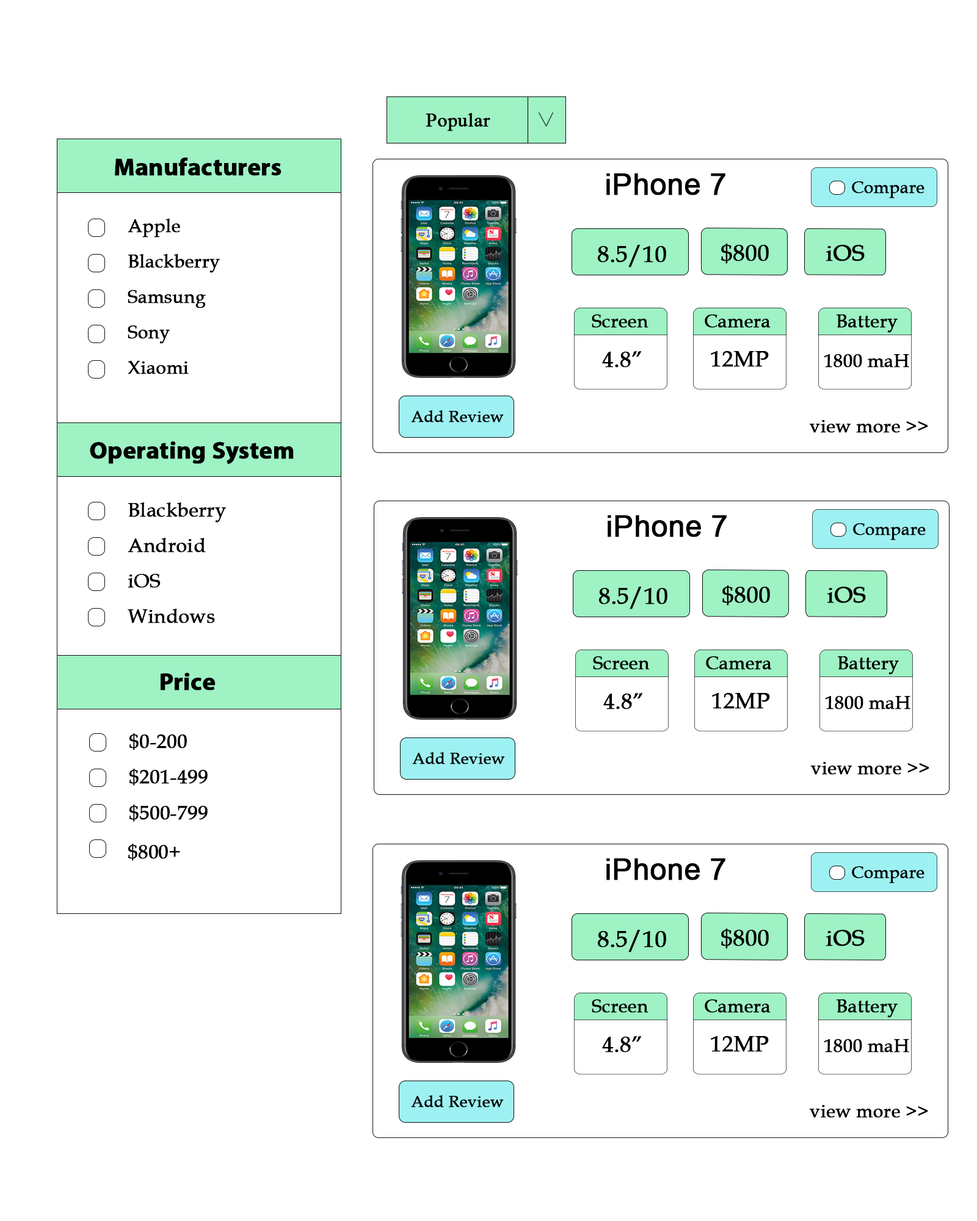
<style>
.page{position:relative;width:977px;height:1221px;background:#ffffff}
.page>*{position:absolute;margin:0}
.t1{font:19.5px "TimesNewRomanPSMT";color:#000000;font-weight:bold}
.t2{font:24.4px "MyriadPro-Bold";color:#010101;font-weight:bold}
.t3{font:29.3px "ArialMT";color:#000000;font-weight:bold}
.t4{font:17.1px "BookAntiqua";color:#000000;font-weight:bold}
.t5{font:18.3px "BookAntiqua";color:#000000;font-weight:bold}
.t6{font:23.2px "BookAntiqua";color:#000000;font-weight:bold}
.t7{font:22px "BookAntiqua";color:#000000;font-weight:bold}
.t8{font:15.9px "BookAntiqua";color:#000000;font-weight:bold}
.t9{font:19.5px "BookAntiqua";color:#000000;font-weight:bold}
</style>
<div class="page">
<p class="t1" style="left:425px;top:113px;width:65px;height:18px">Popular</p>
<p class="t2" style="left:115px;top:157px;width:166px;height:19px">Manufacturers</p>
<p class="t3" style="left:606px;top:173px;width:119px;height:22px">iPhone 7</p>
<p class="t4" style="left:852px;top:181px;width:72px;height:17px">Compare</p>
<p class="t5" style="left:128px;top:219px;width:52px;height:18px">Apple</p>
<p class="t6" style="left:598px;top:245px;width:68px;height:22px">8.5/10</p>
<p class="t6" style="left:721px;top:244px;width:48px;height:20px">$800</p>
<p class="t6" style="left:825px;top:245px;width:39px;height:16px">iOS</p>
<p class="t5" style="left:128px;top:254px;width:92px;height:19px">Blackberry</p>
<p class="t5" style="left:128px;top:290px;width:78px;height:18px">Samsung</p>
<p class="t5" style="left:592px;top:314px;width:56px;height:14px">Screen</p>
<p class="t5" style="left:704px;top:314px;width:66px;height:14px">Camera</p>
<p class="t5" style="left:836px;top:314px;width:61px;height:19px">Battery</p>
<p class="t5" style="left:128px;top:325px;width:42px;height:19px">Sony</p>
<p class="t7" style="left:602px;top:351px;width:39px;height:16px">4.8”</p>
<p class="t7" style="left:711px;top:351px;width:58px;height:16px">12MP</p>
<p class="t5" style="left:128px;top:361px;width:61px;height:13px">Xiaomi</p>
<p class="t5" style="left:824px;top:354px;width:85px;height:13px">1800 maH</p>
<p class="t8" style="left:411px;top:410px;width:93px;height:12px">Add Review</p>
<p class="t5" style="left:809px;top:420px;width:119px;height:13px">view more &gt;&gt;</p>
<p class="t2" style="left:90px;top:441px;width:204px;height:23px">Operating System</p>
<p class="t9" style="left:128px;top:502px;width:98px;height:21px">Blackberry</p>
<p class="t3" style="left:607px;top:515px;width:119px;height:22px">iPhone 7</p>
<p class="t4" style="left:853px;top:523px;width:72px;height:17px">Compare</p>
<p class="t9" style="left:128px;top:538px;width:78px;height:14px">Android</p>
<p class="t9" style="left:128px;top:574px;width:33px;height:14px">iOS</p>
<p class="t6" style="left:599px;top:587px;width:68px;height:22px">8.5/10</p>
<p class="t6" style="left:722px;top:585px;width:48px;height:21px">$800</p>
<p class="t6" style="left:827px;top:587px;width:39px;height:16px">iOS</p>
<p class="t9" style="left:128px;top:609px;width:87px;height:14px">Windows</p>
<p class="t5" style="left:593px;top:656px;width:57px;height:14px">Screen</p>
<p class="t5" style="left:706px;top:656px;width:66px;height:14px">Camera</p>
<p class="t5" style="left:837px;top:656px;width:62px;height:19px">Battery</p>
<p class="t2" style="left:161px;top:673px;width:54px;height:17px">Price</p>
<p class="t7" style="left:603px;top:693px;width:39px;height:16px">4.8”</p>
<p class="t7" style="left:712px;top:693px;width:58px;height:16px">12MP</p>
<p class="t5" style="left:825px;top:696px;width:85px;height:13px">1800 maH</p>
<p class="t9" style="left:129px;top:733px;width:58px;height:17px">$0-200</p>
<p class="t8" style="left:412px;top:752px;width:93px;height:12px">Add Review</p>
<p class="t5" style="left:810px;top:762px;width:119px;height:13px">view more &gt;&gt;</p>
<p class="t9" style="left:129px;top:769px;width:79px;height:17px">$201-499</p>
<p class="t9" style="left:129px;top:805px;width:79px;height:17px">$500-799</p>
<p class="t9" style="left:128px;top:844px;width:52px;height:17px">$800+<br>+++</p>
<p class="t3" style="left:606px;top:858px;width:119px;height:22px">iPhone 7</p>
<p class="t4" style="left:852px;top:866px;width:72px;height:17px">Compare</p>
<p class="t6" style="left:598px;top:930px;width:68px;height:22px">8.5/10</p>
<p class="t6" style="left:721px;top:928px;width:48px;height:21px">$800</p>
<p class="t6" style="left:825px;top:930px;width:39px;height:16px">iOS</p>
<p class="t5" style="left:592px;top:999px;width:56px;height:14px">Screen</p>
<p class="t5" style="left:704px;top:999px;width:66px;height:14px">Camera</p>
<p class="t5" style="left:836px;top:999px;width:61px;height:19px">Battery</p>
<p class="t7" style="left:602px;top:1036px;width:39px;height:16px">4.8”</p>
<p class="t7" style="left:711px;top:1036px;width:58px;height:16px">12MP</p>
<p class="t5" style="left:824px;top:1039px;width:85px;height:13px">1800 maH</p>
<p class="t8" style="left:411px;top:1095px;width:93px;height:12px">Add Review</p>
<p class="t5" style="left:809px;top:1105px;width:119px;height:13px">view more &gt;&gt;</p>
</div>
